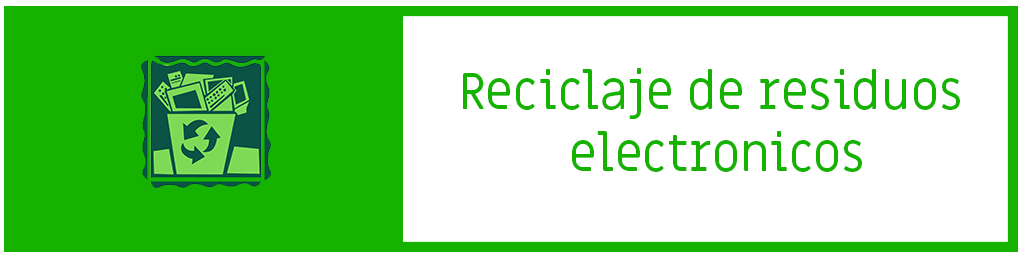
<style>
.page{position:relative;width:1024px;height:256px;background:#ffffff}
.page>*{position:absolute;margin:0}
.t1{font:52.1px "MiriamLibre-Regular";color:#15b300;scale:0.96 1}
</style>
<div class="page">
<p class="t1" style="left:463px;top:68px;width:497px;height:104px;text-align:center">Reciclaje de residuos <br>electronicos</p>
</div>
